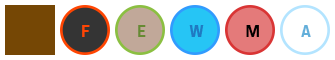
<style>
.page{position:relative;width:335px;height:60px;background:#ffffff}
.page>*{position:absolute;margin:0}
.t1{font:14.7px "FreeroadRegular";letter-spacing:0.08em;color:#ff4502}
.t2{font:14.7px "FreeroadRegular";letter-spacing:0.08em;color:#668a33}
.t3{font:14.7px "FreeroadRegular";letter-spacing:0.08em;color:#1f7ac2}
.t4{font:14.7px "FreeroadRegular";letter-spacing:0.08em;color:#000000}
.t5{font:14.7px "FreeroadRegular";letter-spacing:0.08em;color:#63afda}
</style>
<div class="page">
<p class="t1" style="left:82px;top:25px;width:8px;height:12px">F</p>
<p class="t2" style="left:138px;top:25px;width:8px;height:12px">E</p>
<p class="t3" style="left:189px;top:25px;width:15px;height:12px">W</p>
<p class="t4" style="left:246px;top:25px;width:13px;height:12px">M</p>
<p class="t5" style="left:301px;top:25px;width:10px;height:12px">A</p>
</div>
